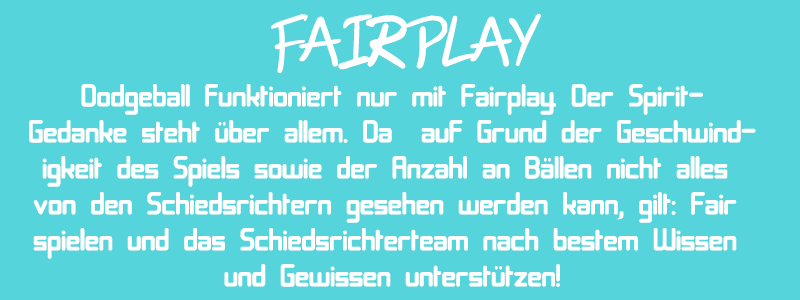
<style>
.page{position:relative;width:800px;height:300px;background:#55d4db}
.page>*{position:absolute;margin:0}
.t1{font:49.8px "AbjectFailure";color:#ffffff}
.t2{font:30px "11S01BlackTuesday";color:#ffffff}
</style>
<div class="page">
<p class="t1" style="left:271px;top:13px;width:270px;height:61px">FAIRPLAY</p>
<p class="t2" style="left:29px;top:84px;width:727px;height:203px;text-align:center">Dodgeball funktioniert nur mit Fairplay. Der Spirit-<br>Gedanke steht über allem. Da  auf Grund der Geschwind-<br>igkeit des Spiels sowie der Anzahl an Bällen nicht alles <br>von den Schiedsrichtern gesehen werden kann, gilt: Fair <br>spielen und das Schiedsrichterteam nach bestem Wissen <br>und Gewissen unterstützen!</p>
</div>
